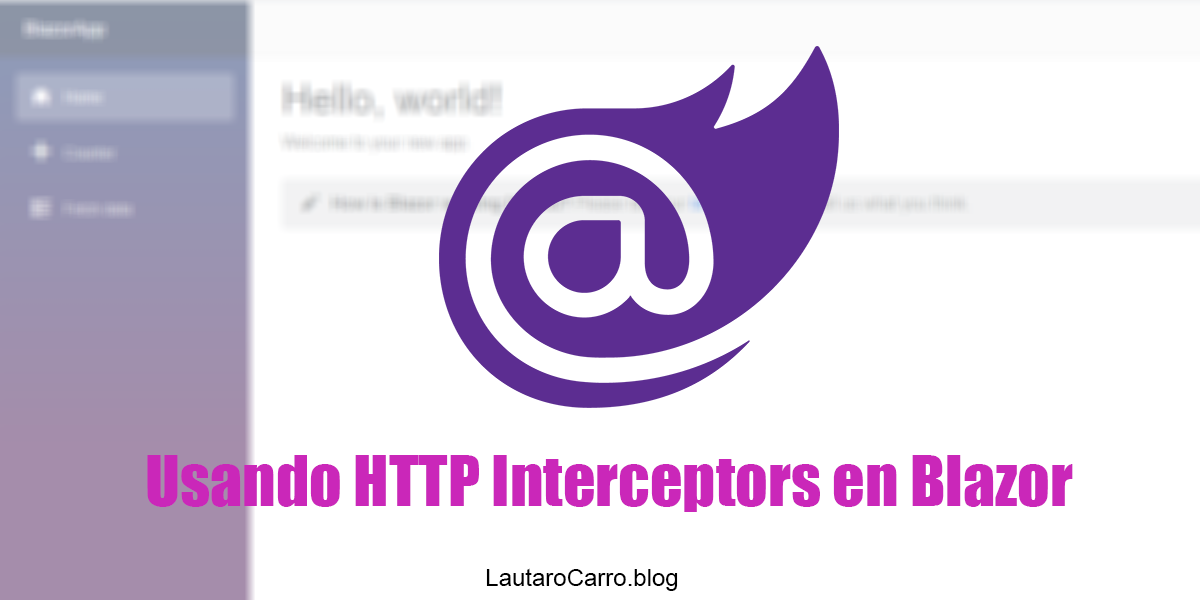
<style>
.page{position:relative;width:1200px;height:600px;background:#ffffff}
.page>*{position:absolute;margin:0}
.t1{font:64px "Impact";color:#ca27b9}
.t2{font:24px "ArialMT";color:#000000}
</style>
<div class="page">
<p class="t1" style="left:147px;top:455px;width:926px;height:57px">Usando HTTP Interceptors en Blazor</p>
<p class="t2" style="left:486px;top:568px;width:192px;height:23px">LautaroCarro.blog</p>
</div>
